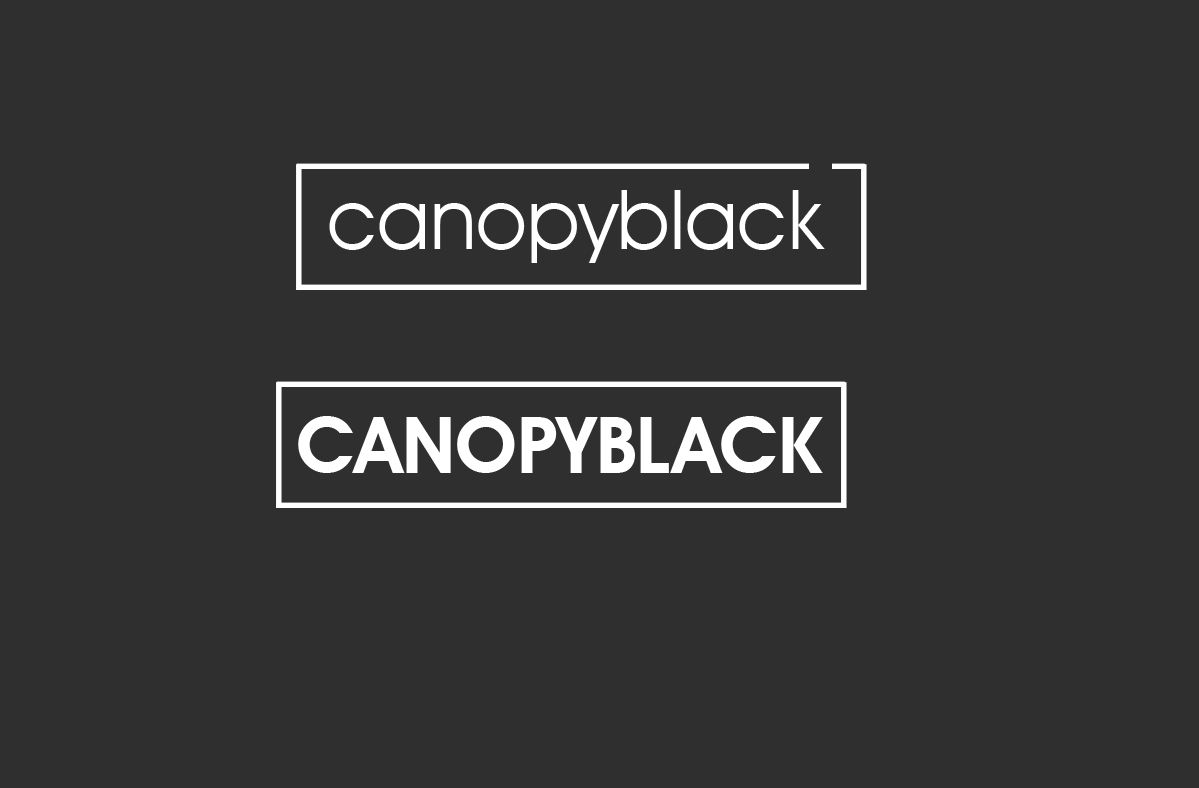
<style>
.page{position:relative;width:1199px;height:788px;background:#2f2f2f}
.page>*{position:absolute;margin:0}
.t1{font:83.3px "AvantGardeITCbyBT-Book";color:#ffffff}
.t2{font:78.3px "AvantGardeITCbyBT-Demi";color:#ffffff;text-transform:uppercase}
</style>
<div class="page">
<p class="t1" style="left:329px;top:190px;width:496px;height:73px">canopyblack</p>
<p class="t2" style="left:298px;top:416px;width:525px;height:57px">canopyblack</p>
</div>
